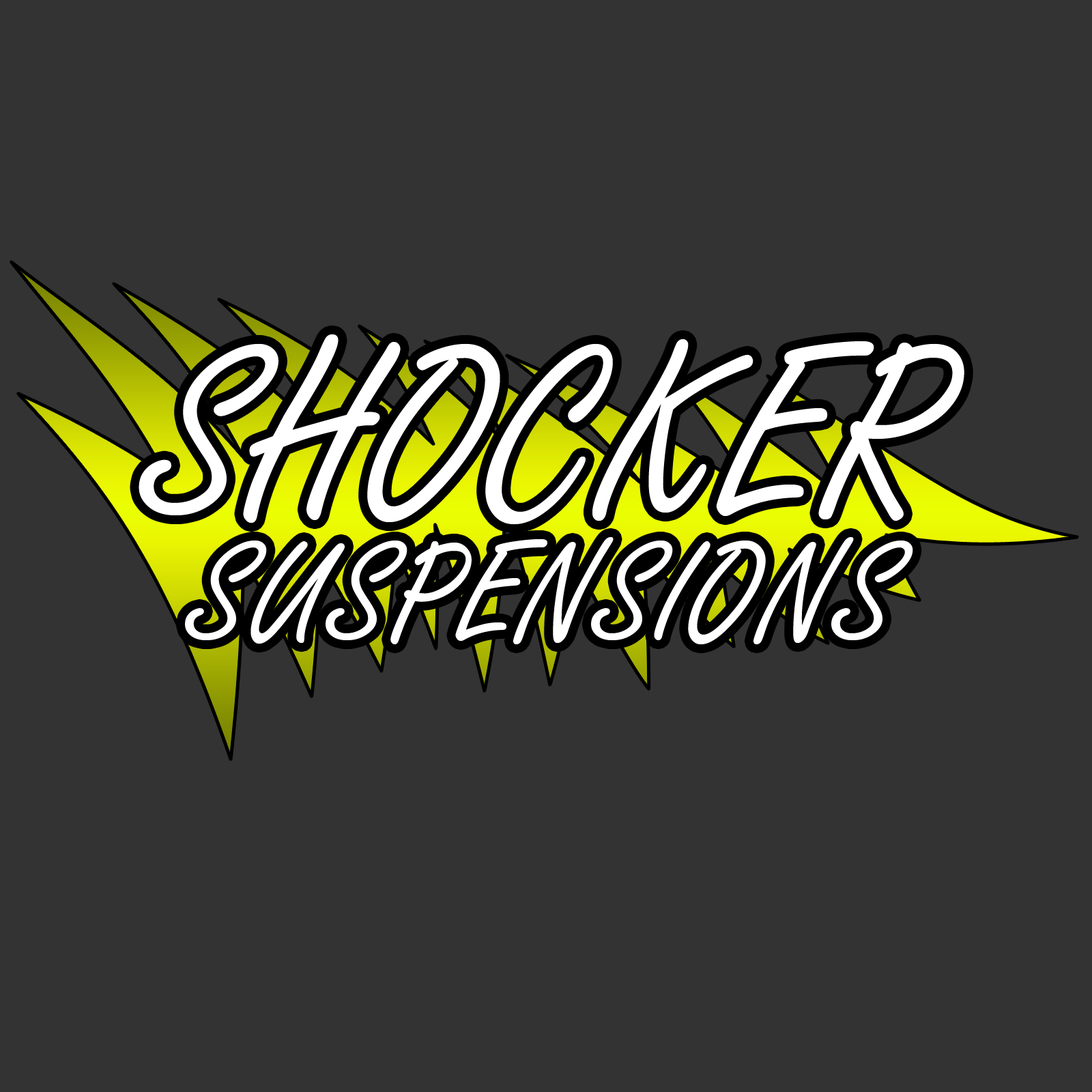
<style>
.page{position:relative;width:1092px;height:1092px;background:#333333}
.page>*{position:absolute;margin:0}
.t1{font:153.8px/123.7px "FreestyleScript-Regular";color:#ffffff}
.t2{font:263.7px/123.7px "FreestyleScript-Regular";color:#ffffff}
</style>
<div class="page">
<p class="t1" style="left:139px;top:334px;width:825px;height:310px;text-align:center"><span class="t2">SHOCKER<br></span>SUSPENSIONS</p>
</div>
